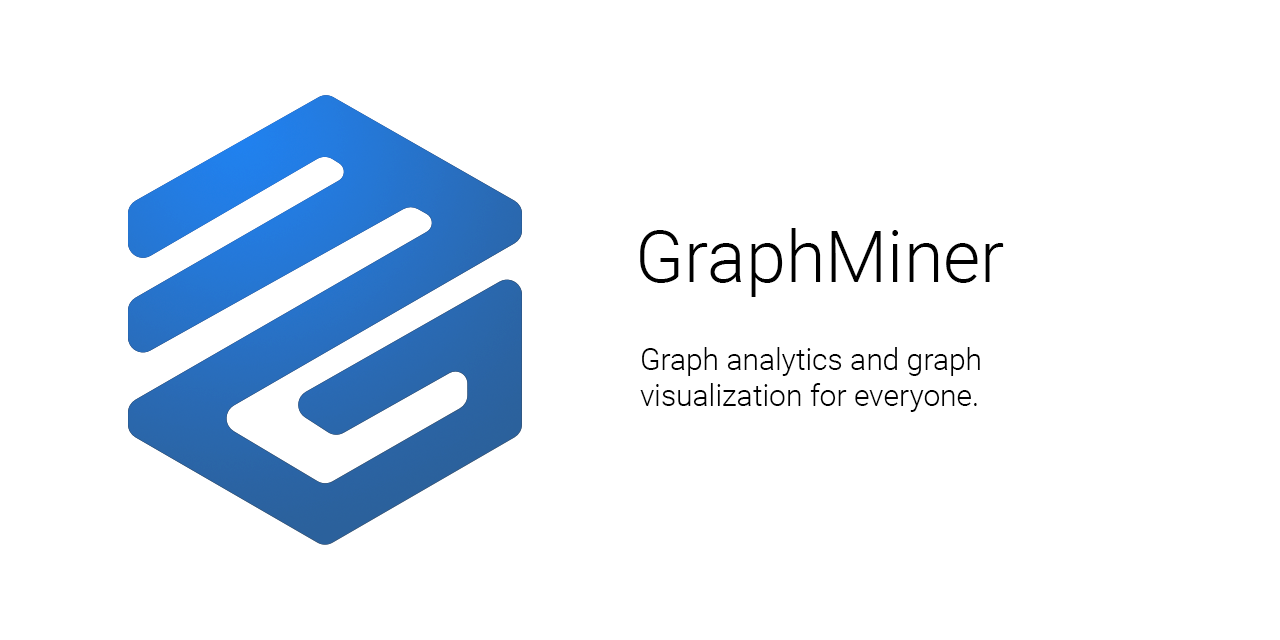
<style>
.page{position:relative;width:1280px;height:640px;background:#ffffff}
.page>*{position:absolute;margin:0}
.t1{font:72px "Roboto-Light";color:#000000}
.t2{font:30px "Roboto-Light";color:#000000}
</style>
<div class="page">
<p class="t1" style="left:640px;top:228px;width:364px;height:69px">GraphMiner</p>
<p class="t2" style="left:640px;top:347px;width:340px;height:65px">Graph analytics and graph <br>visualization for everyone.</p>
</div>
